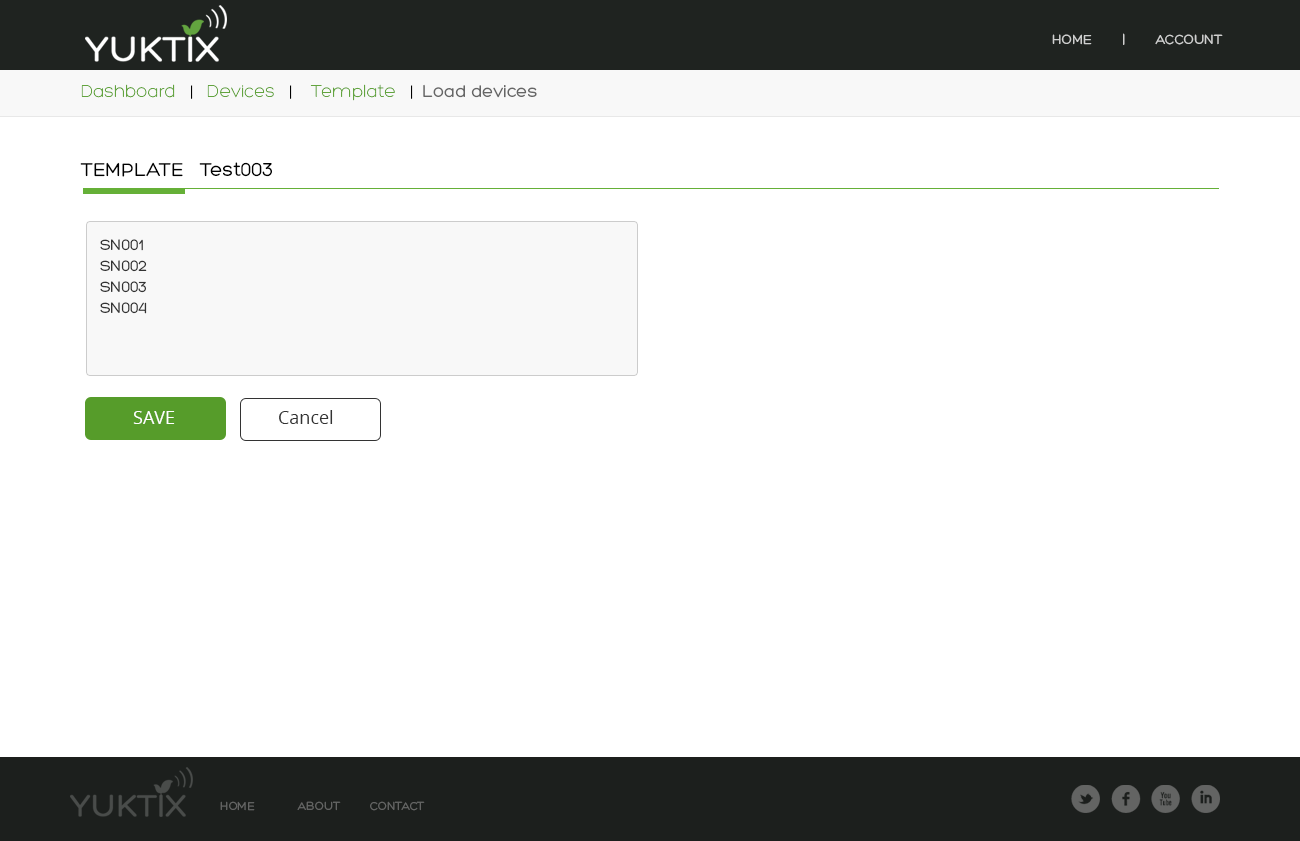
<style>
.page{position:relative;width:1300px;height:841px;background:#ffffff}
.page>*{position:absolute;margin:0}
.t1{font:14px "Hero";color:#cecfce;text-transform:uppercase}
.t2{font:18px "Hero";color:#666666}
.t3{font:18px "Hero-Light";color:#63a43f}
.t4{font:18px "Hero-Light";color:#000000}
.t5{font:20px "Hero";color:#000000;text-transform:uppercase}
.t6{font:20px "Hero";color:#000000}
.t7{font:16px/21px "Hero";color:#333333;text-transform:uppercase}
.t8{font:18px "OpenSans";color:#ffffff}
.t9{font:18px "OpenSans";color:#333333}
.t10{font:40.5px "Socialico";letter-spacing:0.2em;color:#636463}
.t11{font:12.2px "Hero";color:#636463;text-transform:uppercase}
</style>
<div class="page">
<p class="t1" style="left:1052px;top:33px;width:171px;height:12px">home        |        Account</p>
<p class="t2" style="left:81px;top:84px;width:456px;height:17px"><span class="t3">Dashboard</span><span class="t4">   |   </span><span class="t3">Devices   </span><span class="t4">|    </span><span class="t3">Template   </span><span class="t4">|  </span>Load devices</p>
<p class="t5" style="left:80px;top:162px;width:192px;height:15px">template   <span class="t6">Test003</span></p>
<p class="t7" style="left:100px;top:239px;width:47px;height:75px">sn001<br>sn002<br>sn003<br>sn004</p>
<p class="t8" style="left:133px;top:411px;width:42px;height:13px">SAVE</p>
<p class="t9" style="left:279px;top:410px;width:54px;height:14px">Cancel</p>
<p class="t10" style="left:1071px;top:785px;width:149px;height:28px">lfxi</p>
<p class="t11" style="left:220px;top:801px;width:205px;height:10px">home             About         Contact</p>
</div>
